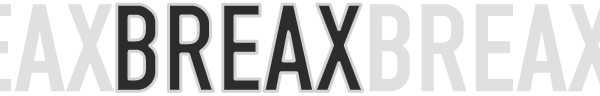
<style>
.page{position:relative;width:600px;height:96px;background:#ffffff}
.page>*{position:absolute;margin:0}
.t1{font:130px "DIN-1451-Engschrift-Regular";color:#e0e0e0}
.t2{font:130px "DIN-1451-Engschrift-Regular";color:#2c2c2c}
</style>
<div class="page">
<p class="t1" style="left:0px;top:4px;width:114px;height:88px">BREAX</p>
<p class="t2" style="left:116px;top:4px;width:247px;height:88px">BREAX</p>
<p class="t1" style="left:369px;top:4px;width:231px;height:88px">BREAX</p>
</div>
